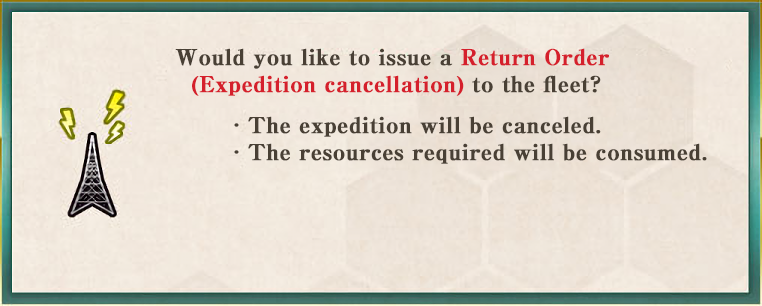
<style>
.page{position:relative;width:762px;height:306px}
.page>*{position:absolute;margin:0}
.t1{font:22px "RyuminPro-ExBold";color:#d5202c;font-weight:bold}
.t2{font:22px "RyuminPro-ExBold";color:#494035;font-weight:bold}
</style>
<div class="page">
<p class="t1" style="left:175px;top:48px;width:434px;height:48px;text-align:center"><span class="t2">Would you like to issue a </span>Return Order <br>(Expedition cancellation)<span class="t2"> to the fleet?</span></p>
<p class="t2" style="left:234px;top:116px;width:473px;height:48px">· The expedition will be canceled.<br>· The resources required will be consumed.</p>
</div>
